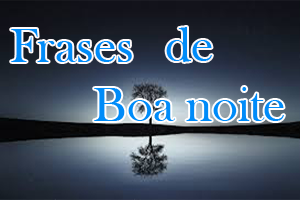
<style>
.page{position:relative;width:300px;height:200px}
.page>*{position:absolute;margin:0}
.t1{font:50px "BaskOldFace";color:#008bf8}
</style>
<div class="page">
<p class="t1" style="left:11px;top:29px;width:121px;height:33px">Frases</p>
<p class="t1" style="left:166px;top:27px;width:46px;height:35px">de</p>
<p class="t1" style="left:94px;top:87px;width:190px;height:34px">Boa noite</p>
</div>
